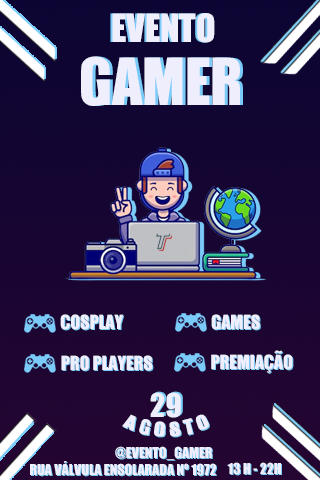
<style>
.page{position:relative;width:320px;height:480px}
.page>*{position:absolute;margin:0}
.t1{font:36px "GaboDrive";color:#eeeefc}
.t2{font:60px "GaboDrive";color:#eeeefc}
.t3{font:18px "GaboDrive";color:#eeeefc}
.t4{font:18px "GaboDrive"}
.t5{font:30px "Impact";color:#eeeefc}
.t6{font:30px "Impact"}
.t7{font:14px "GaboDrive";color:#eeeefc}
.t8{font:14px "GaboDrive"}
.t9{font:14px "Impact";color:#eeeefc}
.t10{font:14px "Impact"}
</style>
<div class="page">
<p class="t1" style="left:110px;top:13px;width:103px;height:30px">EVENTO</p>
<p class="t1" style="left:112px;top:13px;width:103px;height:30px">EVENTO</p>
<p class="t2" style="left:81px;top:56px;width:159px;height:50px">GAMER</p>
<p class="t2" style="left:84px;top:56px;width:159px;height:50px">GAMER</p>
<p class="t3" style="left:60px;top:314px;width:64px;height:16px">COSPLAY</p>
<p class="t4" style="left:61px;top:315px;width:64px;height:16px">COSPLAY</p>
<p class="t3" style="left:211px;top:314px;width:49px;height:16px">GAMES</p>
<p class="t4" style="left:212px;top:315px;width:49px;height:16px">GAMES</p>
<p class="t3" style="left:211px;top:350px;width:82px;height:23px">PREMIAÇÃO</p>
<p class="t4" style="left:212px;top:351px;width:82px;height:23px">PREMIAÇÃO</p>
<p class="t3" style="left:61px;top:355px;width:92px;height:16px">PRO PLAYERS</p>
<p class="t4" style="left:62px;top:356px;width:92px;height:16px">PRO PLAYERS</p>
<p class="t5" style="left:150px;top:392px;width:31px;height:26px">29</p>
<p class="t6" style="left:152px;top:391px;width:31px;height:26px">29</p>
<p class="t3" style="left:122px;top:414px;width:87px;height:23px">A G O S T O</p>
<p class="t3" style="left:123px;top:415px;width:87px;height:23px">A G O S T O</p>
<p class="t7" style="left:115px;top:446px;width:97px;height:14px">@EVENTO_GAMER</p>
<p class="t8" style="left:116px;top:447px;width:97px;height:14px">@EVENTO_GAMER</p>
<p class="t7" style="left:30px;top:461px;width:186px;height:15px">RUA VÁLVULA ENSOLARADA N<span class="t9">º 1972</span></p>
<p class="t8" style="left:31px;top:462px;width:186px;height:15px">RUA VÁLVULA ENSOLARADA N<span class="t10">º 1972</span></p>
<p class="t9" style="left:227px;top:462px;width:54px;height:13px">13 H - 22H</p>
<p class="t10" style="left:228px;top:463px;width:54px;height:13px">13 H - 22H</p>
</div>
